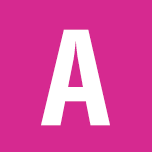
<style>
.page{position:relative;width:152px;height:152px;background:#d62990}
.page>*{position:absolute;margin:0}
.t1{font:127.1px "Helvetica-Condensed-Bold";color:#ffffff}
</style>
<div class="page">
<p class="t1" style="left:41px;top:29px;width:69px;height:97px">A</p>
</div>
